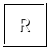
<style>
.page{position:relative;width:48px;height:48px;background:#ffffff}
.page>*{position:absolute;margin:0}
.t1{font:19px "ProductSans-Regular";color:#ffffff}
.t2{font:19px "ProductSans-Regular"}
</style>
<div class="page">
<p class="t1" style="left:19px;top:17px;width:11px;height:15px">R</p>
<p class="t2" style="left:20px;top:18px;width:11px;height:15px">R</p>
</div>
